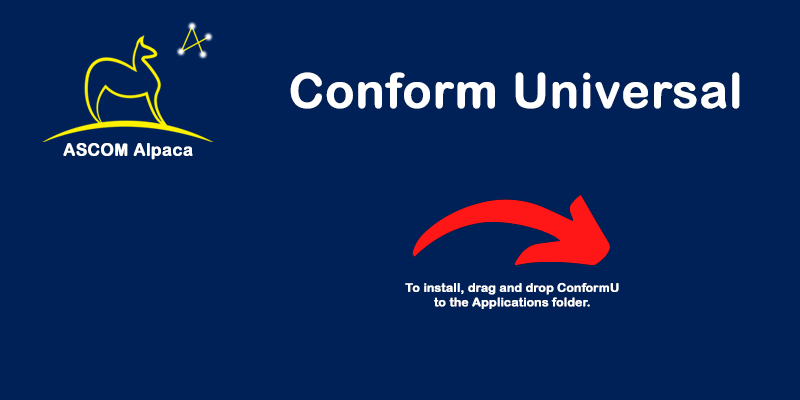
<style>
.page{position:relative;width:800px;height:400px;background:#002157}
.page>*{position:absolute;margin:0}
.t1{font:48px "ArialRoundedMTBold";color:#ffffff;font-weight:bold}
.t2{font:16.9px "ArialRoundedMTBold";color:#ffffff;font-weight:bold}
.t3{font:12px "ArialRoundedMTBold";color:#ffffff;font-weight:bold}
</style>
<div class="page">
<p class="t1" style="left:290px;top:72px;width:450px;height:37px">Conform Universal</p>
<p class="t2" style="left:63px;top:143px;width:130px;height:17px">ASCOM Alpaca</p>
<p class="t3" style="left:405px;top:283px;width:214px;height:26px;text-align:center">To install, drag and drop ConformU<br>to the Applications folder.</p>
</div>
